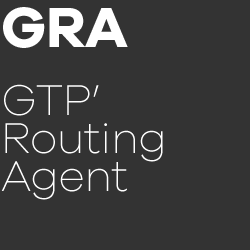
<style>
.page{position:relative;width:250px;height:250px;background:#333333}
.page>*{position:absolute;margin:0}
.t1{font:58.5px "GalanoGrotesque-Bold";letter-spacing:-0.01em;color:#ffffff}
.t2{font:44.5px/38px "GalanoGrotesque-ExtraLight";letter-spacing:-0.01em;color:#ffffff}
</style>
<div class="page">
<p class="t1" style="left:3px;top:7px;width:125px;height:41px">GRA</p>
<p class="t2" style="left:1px;top:84px;width:162px;height:116px">GTP’ <br>Routing <br>Agent</p>
</div>
